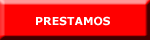
<style>
.page{position:relative;width:150px;height:40px;background:#ff0000}
.page>*{position:absolute;margin:0}
.t1{font:11px "Verdana-Bold";color:#ffffff}
</style>
<div class="page">
<p class="t1" style="left:36px;top:16px;width:74px;height:10px">PRESTAMOS</p>
</div>
